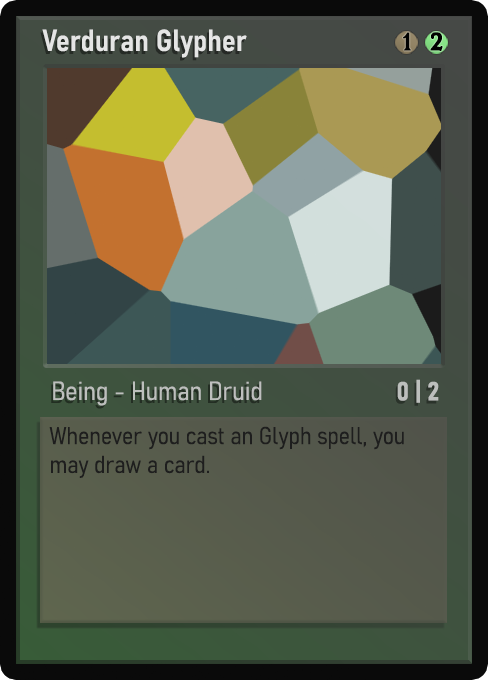
<style>
.page{position:relative;width:488px;height:680px}
.page>*{position:absolute;margin:0}
.t1{font:30px "Bahnschrift-SemiBoldSemiCondensed";color:#f2f2f2;font-weight:bold}
.t2{font:25px "WTRRoycroft";color:#000000;font-weight:bold;scale:1.09 1}
.t3{font:26px "Bahnschrift-LightSemiCondensed";color:#c8c8c8;font-weight:bold}
.t4{font:26px "Bahnschrift-BoldSemiCondensed";color:#bdbfbd;font-weight:bold}
.t5{font:24px "Bahnschrift-LightSemiCondensed";color:#1e1e1e;font-weight:bold}
</style>
<div class="page">
<p class="t1" style="left:42px;top:29px;width:205px;height:29px;opacity:0.9">Verduran Glypher</p>
<p class="t2" style="left:403px;top:32px;width:8px;height:19px">1</p>
<p class="t2" style="left:430px;top:32px;width:13px;height:19px">2</p>
<p class="t3" style="left:53px;top:381px;width:209px;height:25px;opacity:0.9">Being - Human Druid</p>
<p class="t4" style="left:397px;top:379px;width:42px;height:24px">0 | 2</p>
<p class="t5" style="left:49px;top:426px;width:355px;height:52px">Whenever you cast an Glyph spell, you may draw a card.</p>
</div>
